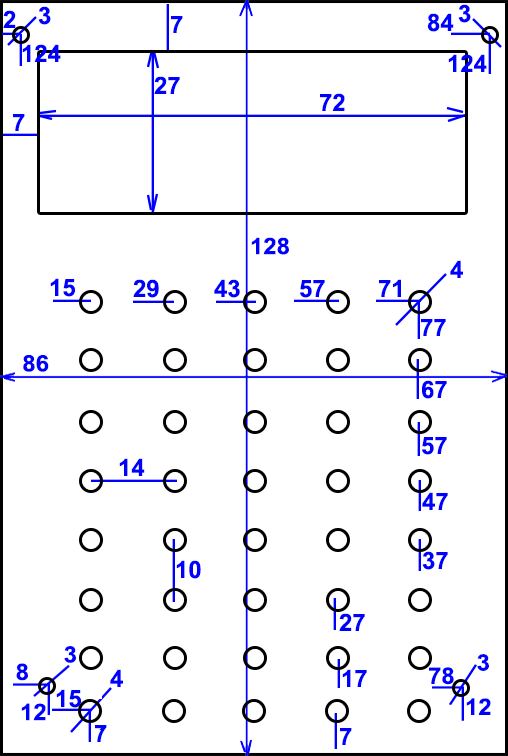
<style>
.page{position:relative;width:508px;height:756px;background:#ffffff}
.page>*{position:absolute;margin:0}
.t1{font:24px "Arial-BoldMT";color:#0000ff}
.t2{font:22.7px "Arial-BoldMT";color:#0000ff;scale:1.06 1}
</style>
<div class="page">
<p class="t1" style="left:38px;top:6px;width:13px;height:19px">3</p>
<p class="t1" style="left:458px;top:4px;width:13px;height:19px">3</p>
<p class="t1" style="left:3px;top:10px;width:13px;height:18px">2</p>
<p class="t1" style="left:171px;top:16px;width:12px;height:17px">7</p>
<p class="t1" style="left:427px;top:13px;width:27px;height:19px">84</p>
<p class="t1" style="left:22px;top:44px;width:39px;height:18px">124</p>
<p class="t1" style="left:448px;top:54px;width:39px;height:18px">124</p>
<p class="t1" style="left:154px;top:76px;width:26px;height:18px">27</p>
<p class="t1" style="left:320px;top:93px;width:25px;height:18px">72</p>
<p class="t1" style="left:13px;top:114px;width:12px;height:17px">7</p>
<p class="t2" style="left:251px;top:237px;width:38px;height:18px">128</p>
<p class="t1" style="left:450px;top:260px;width:13px;height:18px">4</p>
<p class="t1" style="left:50px;top:278px;width:25px;height:19px">15</p>
<p class="t1" style="left:133px;top:279px;width:26px;height:19px">29</p>
<p class="t1" style="left:214px;top:279px;width:26px;height:19px">43</p>
<p class="t1" style="left:300px;top:280px;width:25px;height:18px">57</p>
<p class="t1" style="left:379px;top:279px;width:22px;height:18px">71</p>
<p class="t1" style="left:421px;top:319px;width:25px;height:17px">77</p>
<p class="t2" style="left:23px;top:355px;width:26px;height:17px">86</p>
<p class="t1" style="left:422px;top:380px;width:25px;height:19px">67</p>
<p class="t1" style="left:422px;top:437px;width:25px;height:18px">57</p>
<p class="t1" style="left:119px;top:458px;width:26px;height:18px">14</p>
<p class="t1" style="left:422px;top:492px;width:26px;height:18px">47</p>
<p class="t1" style="left:422px;top:551px;width:26px;height:19px">37</p>
<p class="t1" style="left:176px;top:560px;width:25px;height:19px">10</p>
<p class="t1" style="left:339px;top:613px;width:26px;height:18px">27</p>
<p class="t2" style="left:64px;top:646px;width:12px;height:17px">3</p>
<p class="t2" style="left:477px;top:654px;width:12px;height:17px">3</p>
<p class="t2" style="left:16px;top:663px;width:12px;height:18px">8</p>
<p class="t1" style="left:110px;top:669px;width:13px;height:18px">4</p>
<p class="t1" style="left:342px;top:669px;width:25px;height:18px">17</p>
<p class="t2" style="left:429px;top:667px;width:25px;height:18px">78</p>
<p class="t1" style="left:56px;top:689px;width:25px;height:19px">15</p>
<p class="t2" style="left:466px;top:698px;width:25px;height:17px">12</p>
<p class="t2" style="left:21px;top:703px;width:25px;height:18px">12</p>
<p class="t1" style="left:95px;top:725px;width:12px;height:17px">7</p>
<p class="t1" style="left:340px;top:728px;width:12px;height:17px">7</p>
</div>
